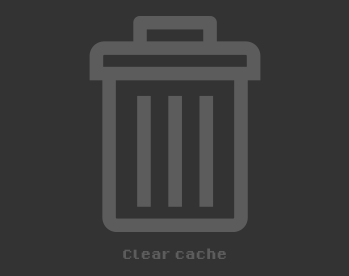
<style>
.page{position:relative;width:349px;height:276px;background:#333333}
.page>*{position:absolute;margin:0}
.t1{font:21px "8-Bit-Madness";color:#5c5c5c}
</style>
<div class="page">
<p class="t1" style="left:123px;top:248px;width:103px;height:11px">Clear cache</p>
</div>
